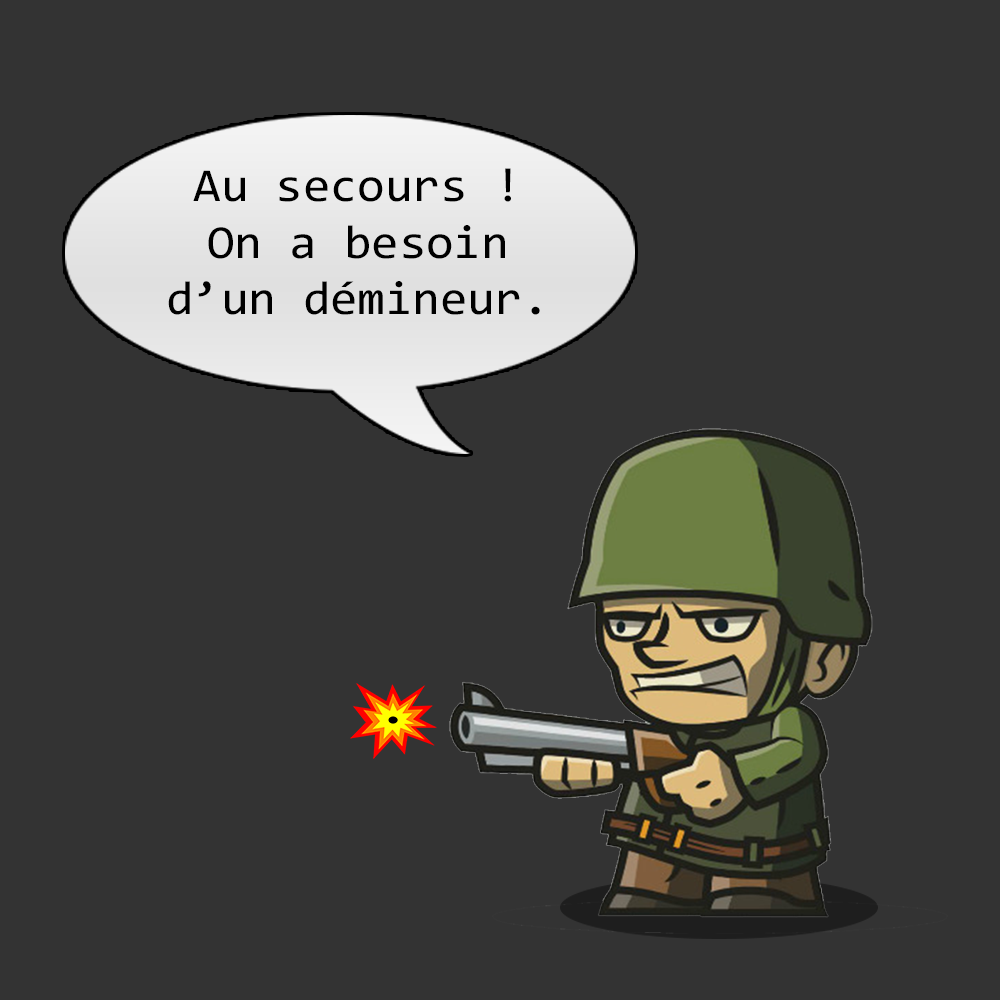
<style>
.page{position:relative;width:1000px;height:1000px;background:#333333}
.page>*{position:absolute;margin:0}
.t1{font:47.2px "Consolas";color:#000000;scale:1.06 1}
</style>
<div class="page">
<p class="t1" style="left:168px;top:168px;width:372px;height:147px;text-align:center">Au secours !<br>On a besoin<br>d’un démineur.</p>
</div>
